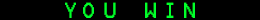
<style>
.page{position:relative;width:260px;height:20px;background:#000000}
.page>*{position:absolute;margin:0}
.t1{font:17.3px "Terminal";color:#00ff2a}
</style>
<div class="page">
<p class="t1" style="left:65px;top:2px;width:11px;height:16px">Y</p>
<p class="t1" style="left:83px;top:2px;width:11px;height:16px">O</p>
<p class="t1" style="left:104px;top:2px;width:12px;height:16px">U</p>
<p class="t1" style="left:145px;top:2px;width:11px;height:16px">W</p>
<p class="t1" style="left:166px;top:2px;width:8px;height:16px">I</p>
<p class="t1" style="left:184px;top:2px;width:11px;height:16px">N</p>
</div>
